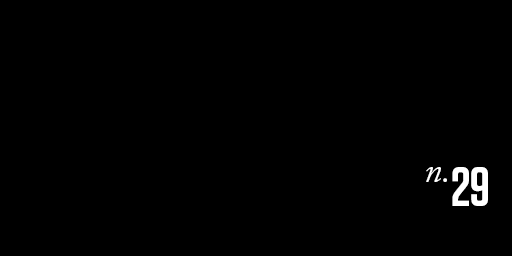
<style>
.page{position:relative;width:512px;height:256px;background:#000000}
.page>*{position:absolute;margin:0}
.t1{font:35px "ACaslonPro-Italic";color:#ffffff}
.t2{font:55px "Tungsten-Semibold";color:#ffffff}
</style>
<div class="page">
<p class="t1" style="left:426px;top:167px;width:62px;height:39px">n.<span class="t2">29</span></p>
</div>
